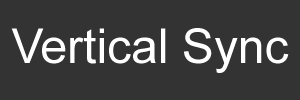
<style>
.page{position:relative;width:300px;height:100px;background:#333333}
.page>*{position:absolute;margin:0}
.t1{font:48px "ArialMT";color:#ffffff}
</style>
<div class="page">
<p class="t1" style="left:11px;top:28px;width:278px;height:45px">Vertical Sync</p>
</div>
